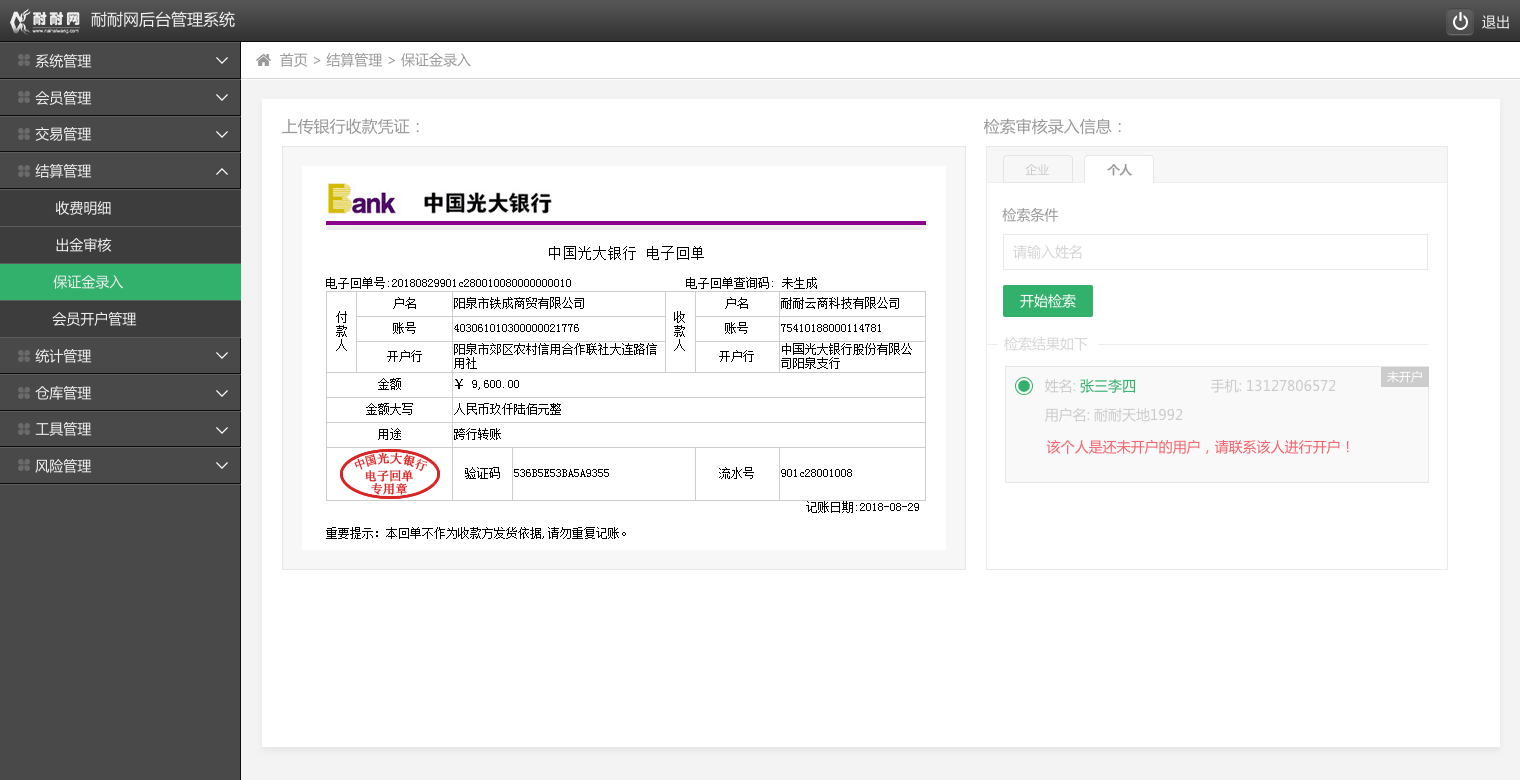
<style>
.page{position:relative;width:1520px;height:780px;background:#ffffff}
.page>*{position:absolute;margin:0}
.t1{font:16px "MicrosoftYaHei";color:#efefef}
.t2{font:14px "MicrosoftYaHei";color:#efefef}
.t3{font:14px "MicrosoftYaHei";color:#999999}
.t4{font:16px "MicrosoftYaHei";color:#999999}
.t5{font:12px "MicrosoftYaHei";color:#cccccc}
.t6{font:12px "MicrosoftYaHei";color:#999999;font-weight:bold}
.t7{font:14px "MicrosoftYaHei";color:#d6d6d6}
.t8{font:14px "MicrosoftYaHei";color:#fffcfc}
.t9{font:12px "MicrosoftYaHei";color:#ffffff}
.t10{font:14px "MicrosoftYaHei";color:#32b16c}
.t11{font:14px "MicrosoftYaHei";color:#cccccc}
.t12{font:14px "MicrosoftYaHei";color:#f4626c}
</style>
<div class="page">
<p class="t1" style="left:91px;top:11px;width:144px;height:17px">耐耐网后台管理系统</p>
<p class="t2" style="left:1482px;top:15px;width:27px;height:14px">退出</p>
<p class="t2" style="left:35px;top:54px;width:57px;height:14px">系统管理</p>
<p class="t3" style="left:280px;top:53px;width:191px;height:14px">首页 &gt; 结算管理 &gt; 保证金录入</p>
<p class="t2" style="left:35px;top:91px;width:57px;height:14px">会员管理</p>
<p class="t4" style="left:282px;top:118px;width:137px;height:17px">上传银行收款凭证：</p>
<p class="t4" style="left:983px;top:118px;width:138px;height:17px">检索审核录入信息：</p>
<p class="t2" style="left:35px;top:127px;width:57px;height:14px">交易管理</p>
<p class="t2" style="left:35px;top:164px;width:57px;height:14px">结算管理</p>
<p class="t5" style="left:1025px;top:164px;width:25px;height:12px">企业</p>
<p class="t6" style="left:1107px;top:164px;width:25px;height:12px">个人</p>
<p class="t2" style="left:55px;top:201px;width:56px;height:14px">收费明细</p>
<p class="t3" style="left:1002px;top:208px;width:57px;height:14px">检索条件</p>
<p class="t2" style="left:56px;top:238px;width:56px;height:14px">出金审核</p>
<p class="t7" style="left:1013px;top:245px;width:69px;height:14px">请输入姓名</p>
<p class="t2" style="left:53px;top:275px;width:70px;height:14px">保证金录入</p>
<p class="t8" style="left:1020px;top:294px;width:56px;height:14px">开始检索</p>
<p class="t2" style="left:52px;top:312px;width:85px;height:14px">会员开户管理</p>
<p class="t7" style="left:1004px;top:337px;width:84px;height:14px">检索结果如下</p>
<p class="t2" style="left:35px;top:349px;width:57px;height:14px">统计管理</p>
<p class="t9" style="left:1387px;top:371px;width:35px;height:12px">未开户</p>
<p class="t2" style="left:35px;top:386px;width:57px;height:14px">仓库管理</p>
<p class="t10" style="left:1044px;top:379px;width:92px;height:14px"><span class="t11">姓名: </span>张三李四</p>
<p class="t11" style="left:1211px;top:379px;width:125px;height:14px">手机: 13127806572</p>
<p class="t11" style="left:1045px;top:408px;width:138px;height:14px">用户名: 耐耐天地1992</p>
<p class="t2" style="left:35px;top:422px;width:57px;height:14px">工具管理</p>
<p class="t12" style="left:1046px;top:440px;width:303px;height:14px">该个人是还未开户的用户，请联系该人进行开户！</p>
<p class="t2" style="left:35px;top:459px;width:57px;height:14px">风险管理</p>
</div>
